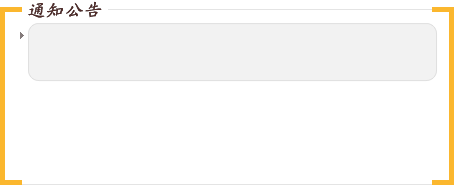
<style>
.page{position:relative;width:454px;height:186px;background:#ffffff}
.page>*{position:absolute;margin:0}
.t1{font:18px "AdobeKaitiStd-Regular";letter-spacing:0.05em;color:#502b29;font-style:italic}
</style>
<div class="page">
<p class="t1" style="left:28px;top:1px;width:74px;height:17px">通知公告</p>
</div>
